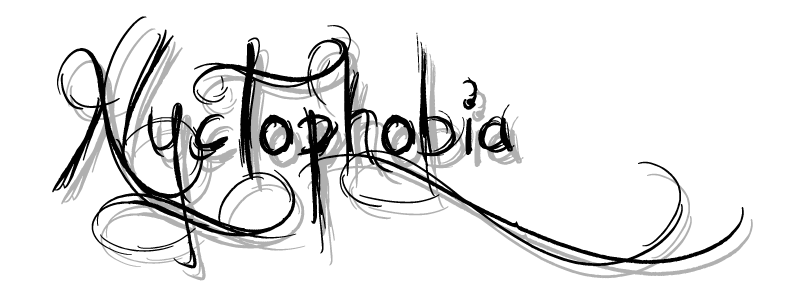
<style>
.page{position:relative;width:800px;height:300px;background:#ffffff}
.page>*{position:absolute;margin:0}
.t1{font:180px "Dunno";color:#010101}
</style>
<div class="page">
<p class="t1" style="left:52px;top:16px;width:692px;height:253px">Nyctophobia_</p>
</div>
